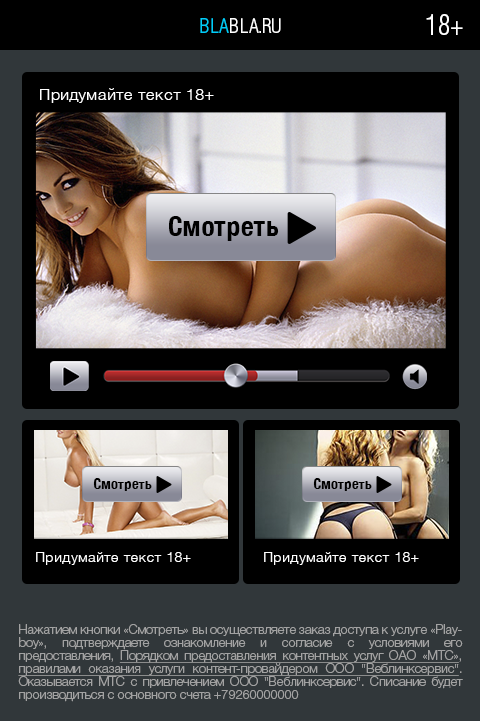
<style>
.page{position:relative;width:480px;height:721px;background:#000000}
.page>*{position:absolute;margin:0}
.t1{font:28.7px "HeliosCondLightC";color:#ffffff;text-transform:uppercase}
.t2{font:20.6px "HeliosCondLightC";color:#ffffff;text-transform:uppercase}
.t3{font:20.6px "HeliosCondLightC";color:#00cdf9;text-transform:uppercase}
.t4{font:15.5px "HelveticaNeue-Light";letter-spacing:0.05em;color:#ffffff}
.t5{font:27px "HelveticaNeueBoldCondensed";color:#000000}
.t6{font:14.3px "HelveticaNeueBoldCondensed";color:#000000}
.t7{font:13.6px "HelveticaNeue-Light";letter-spacing:0.05em;color:#ffffff}
.t8{font:13px/13px "HelveticaNeueCyr-Light";letter-spacing:-0.02em;color:#a2a2a2}
.t9{font:13px/13px "HelveticaNeueCyr-Light";letter-spacing:-0.02em;color:#a2a2a2;text-decoration:underline}
</style>
<div class="page">
<p class="t1" style="left:426px;top:14px;width:37px;height:21px">18+</p>
<p class="t2" style="left:200px;top:18px;width:81px;height:15px"><span class="t3">bla</span>bla.ru</p>
<p class="t4" style="left:40px;top:88px;width:174px;height:15px">Придумайте текст 18+</p>
<p class="t5" style="left:169px;top:216px;width:110px;height:25px">Смотреть</p>
<p class="t6" style="left:93px;top:478px;width:59px;height:13px">Смотреть</p>
<p class="t6" style="left:313px;top:478px;width:59px;height:13px">Смотреть</p>
<p class="t7" style="left:36px;top:552px;width:155px;height:13px">Придумайте текст 18+</p>
<p class="t7" style="left:264px;top:552px;width:155px;height:13px">Придумайте текст 18+</p>
<p class="t8" style="left:18px;top:624px;width:445px;height:78px;text-align:justify">Нажатием кнопки «Смотреть» вы осуществляете заказ доступа к услуге «Playboy», подтверждаете ознакомление и согласие с условиями его предоставления, <span class="t9">Порядком предоставления контентных услуг ОАО «МТС»</span>, <span class="t9">правилами оказания услуги контент-провайдером ООО "Веблинксервис"</span>. Оказывается МТС с привлечением ООО "Веблинксервис". Списание будет производиться с основного счета +79260000000</p>
</div>
